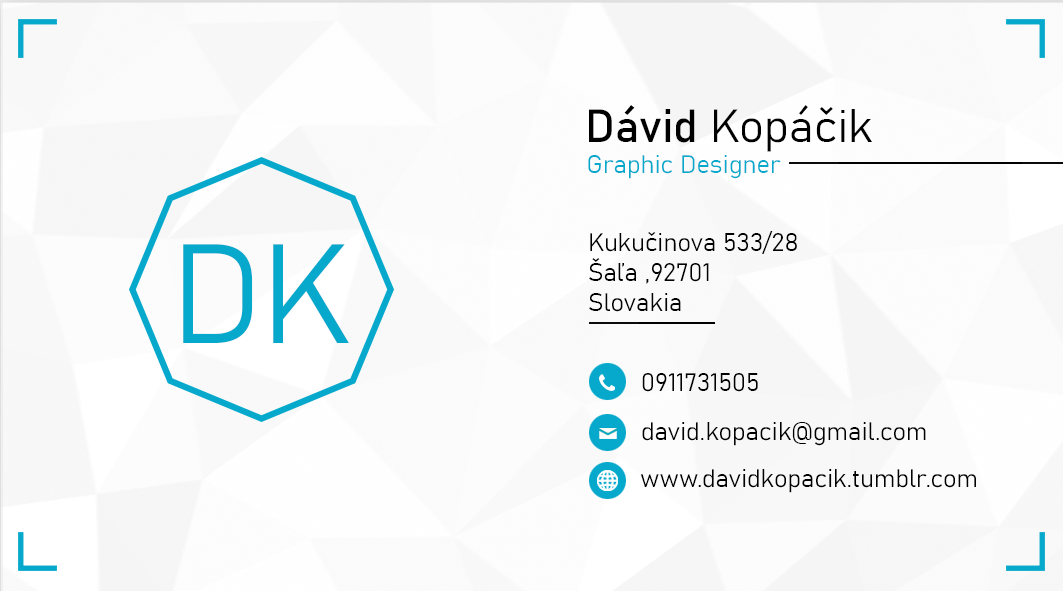
<style>
.page{position:relative;width:1063px;height:591px}
.page>*{position:absolute;margin:0}
.t1{font:45.8px "Bahnschrift-Light";color:#000000}
.t2{font:45.8px "Bahnschrift";color:#000000}
.t3{font:25px "Bahnschrift-Light";color:#06a9cc}
.t4{font:25px "Bahnschrift-Light";color:#000000}
.t5{font:139.1px "Bahnschrift-Light";color:#06a9cc}
</style>
<div class="page">
<p class="t1" style="left:589px;top:105px;width:283px;height:47px"><span class="t2">Dávid</span> Kopáčik</p>
<p class="t3" style="left:588px;top:155px;width:193px;height:24px">Graphic Designer</p>
<p class="t4" style="left:589px;top:231px;width:208px;height:81px">Kukučinova 533/28<br>Šaľa ,92701<br>Slovakia</p>
<p class="t5" style="left:183px;top:244px;width:166px;height:99px">DK</p>
<p class="t4" style="left:642px;top:373px;width:116px;height:19px">0911731505</p>
<p class="t4" style="left:642px;top:422px;width:284px;height:24px">david.kopacik@gmail.com</p>
<p class="t4" style="left:640px;top:469px;width:336px;height:24px">www.davidkopacik.tumblr.com</p>
</div>
